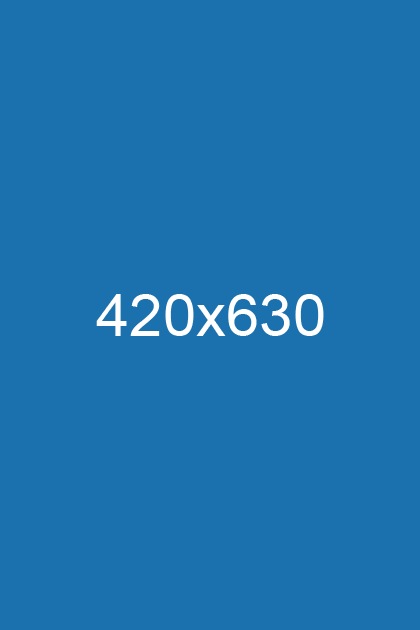
<style>
.page{position:relative;width:420px;height:630px;background:#1a71ae}
.page>*{position:absolute;margin:0}
.t1{font:60px "ArialMT";color:#ffffff}
</style>
<div class="page">
<p class="t1" style="left:96px;top:294px;width:228px;height:42px">420x630</p>
</div>
